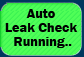
<style>
.page{position:relative;width:84px;height:57px;background:#4ffe57}
.page>*{position:absolute;margin:0}
.t1{font:14px/14px "FranklinGothic-Demi";color:#000101}
</style>
<div class="page">
<p class="t1" style="left:5px;top:9px;width:73px;height:39px;text-align:center">Auto<br>Leak Check<br> Running..</p>
</div>
